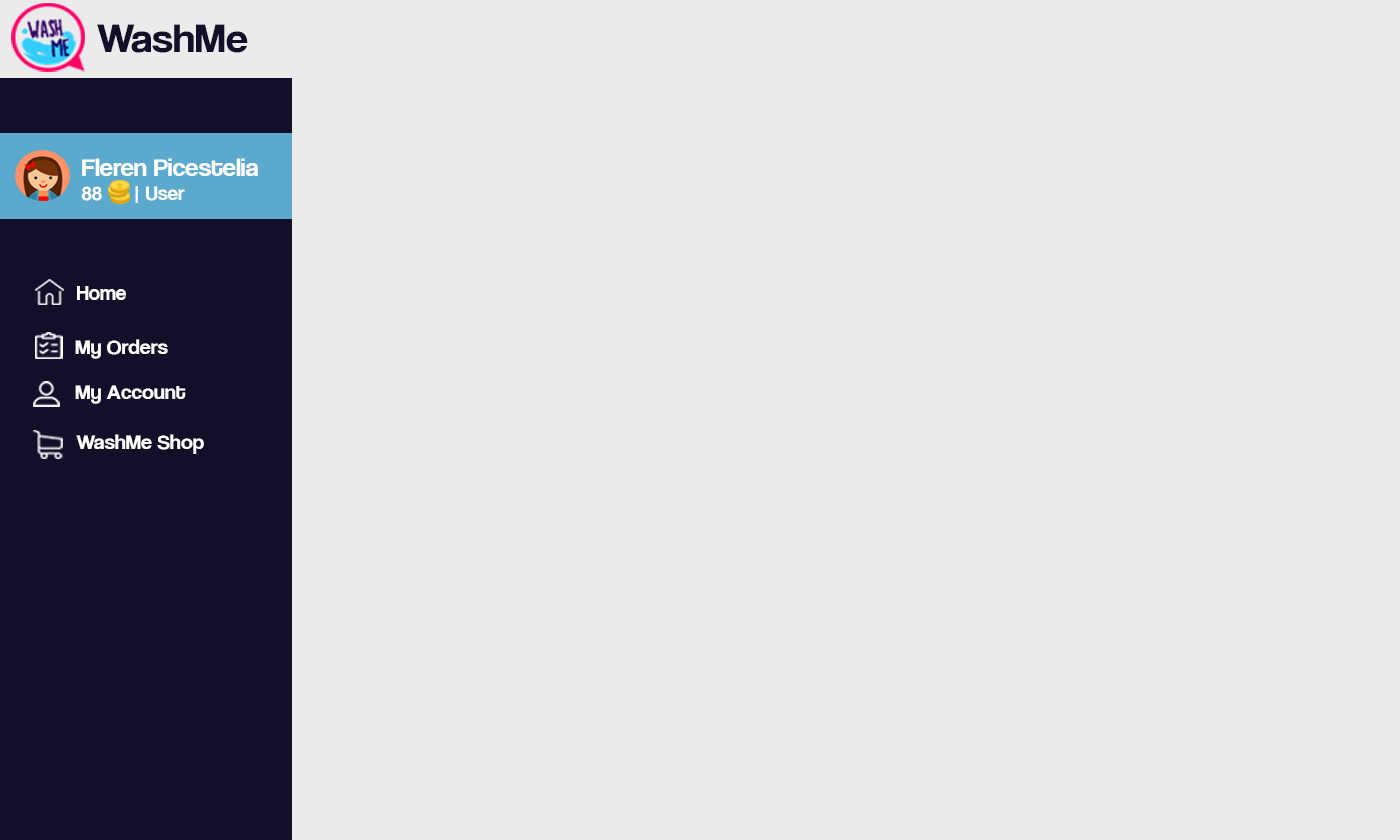
<style>
.page{position:relative;width:1400px;height:840px;background:#ebebeb}
.page>*{position:absolute;margin:0}
.t1{font:42.1px "CoolveticaRg-Regular";color:#120f2b;scale:1.05 1}
.t2{font:25.2px "CoolveticaRg-Regular";color:#ffffff;scale:1.05 1}
.t3{font:20px "CoolveticaRg-Regular";color:#ffffff;scale:1.05 1}
.t4{font:21px "CoolveticaRg-Regular";color:#ffffff}
.t5{font:21px "CoolveticaRg-Regular";color:#ffffff;scale:1.05 1}
</style>
<div class="page">
<p class="t1" style="left:97px;top:24px;width:151px;height:29px">WashMe</p>
<p class="t2" style="left:81px;top:158px;width:177px;height:45px">Fleren Picestelia<br><span class="t3">88      | User</span></p>
<p class="t4" style="left:77px;top:286px;width:49px;height:14px">Home</p>
<p class="t5" style="left:75px;top:339px;width:93px;height:20px">My Orders</p>
<p class="t5" style="left:75px;top:385px;width:111px;height:19px">My Account</p>
<p class="t5" style="left:76px;top:434px;width:128px;height:20px">WashMe Shop</p>
</div>
